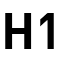
<style>
.page{position:relative;width:64px;height:64px;background:#ffffff}
.page>*{position:absolute;margin:0}
.t1{font:50px "DIN-Bold";color:#000000}
</style>
<div class="page">
<p class="t1" style="left:5px;top:13px;width:49px;height:36px">H1</p>
</div>
